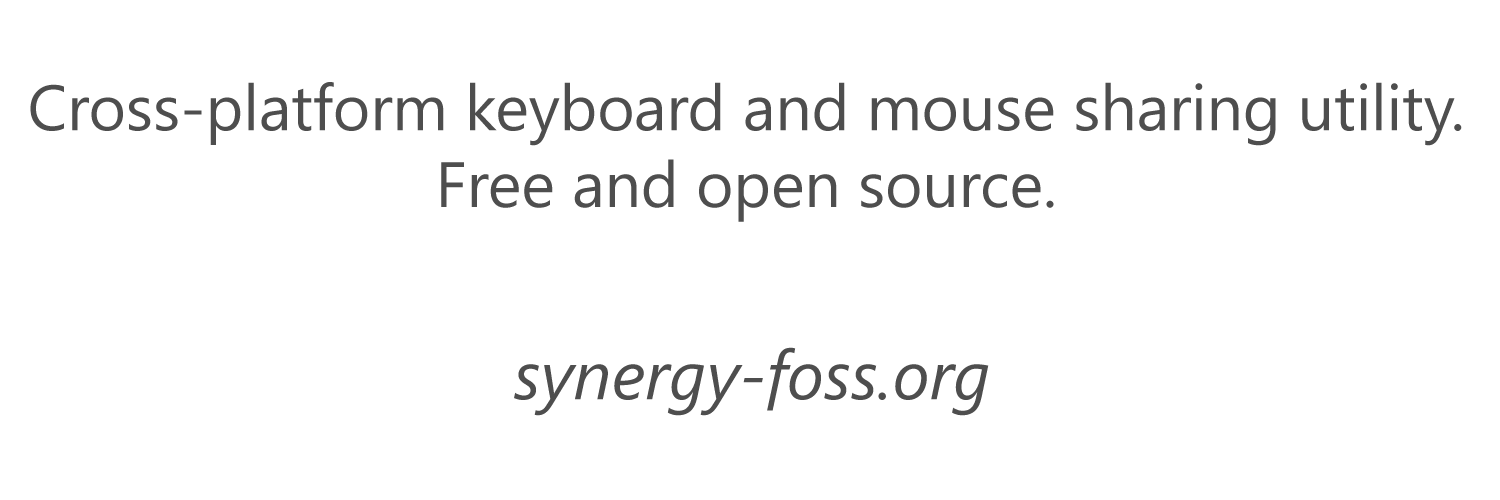
<style>
.page{position:relative;width:1500px;height:500px;background:#ffffff}
.page>*{position:absolute;margin:0}
.t1{font:63.9px "SegoeUI";color:#4e4e4e}
.t2{font:68.6px "SegoeUI-Italic";color:#4e4e4e}
</style>
<div class="page">
<p class="t1" style="left:30px;top:82px;width:1432px;height:140px;text-align:center">Cross-platform keyboard and mouse sharing utility.<br>Free and open source.</p>
<p class="t2" style="left:514px;top:347px;width:475px;height:69px">synergy-foss.org</p>
</div>
